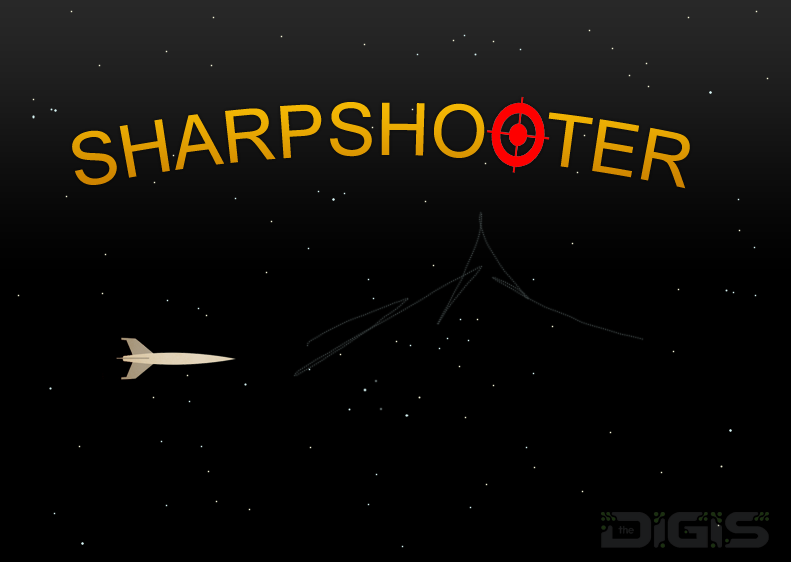
<style>
.page{position:relative;width:791px;height:562px;background:#000000}
.page>*{position:absolute;margin:0}
.t1{font:72px "ArialMT";color:#e4a202}
</style>
<div class="page">
<p class="t1" style="left:72px;top:102px;width:618px;height:87px">SHARPSHO   TER</p>
</div>
